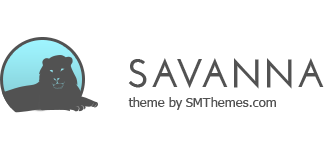
<style>
.page{position:relative;width:324px;height:147px;background:#ffffff}
.page>*{position:absolute;margin:0}
.t1{font:40px "JosefinSans-Bold";color:#525252}
.t2{font:13px "Tahoma";color:#525252}
</style>
<div class="page">
<p class="t1" style="left:128px;top:58px;width:196px;height:31px">SAVANNA</p>
<p class="t2" style="left:128px;top:97px;width:148px;height:13px">theme by SMThemes.com</p>
</div>
